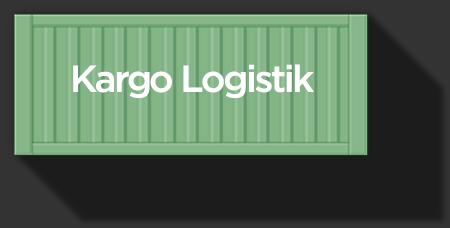
<style>
.page{position:relative;width:450px;height:228px;background:#1c1c1c}
.page>*{position:absolute;margin:0}
.t1{font:37.5px "iCielGotham-Medium";letter-spacing:-0.06em;color:#ffffff}
</style>
<div class="page">
<p class="t1" style="left:73px;top:64px;width:241px;height:34px">Kargo Logistik</p>
</div>
